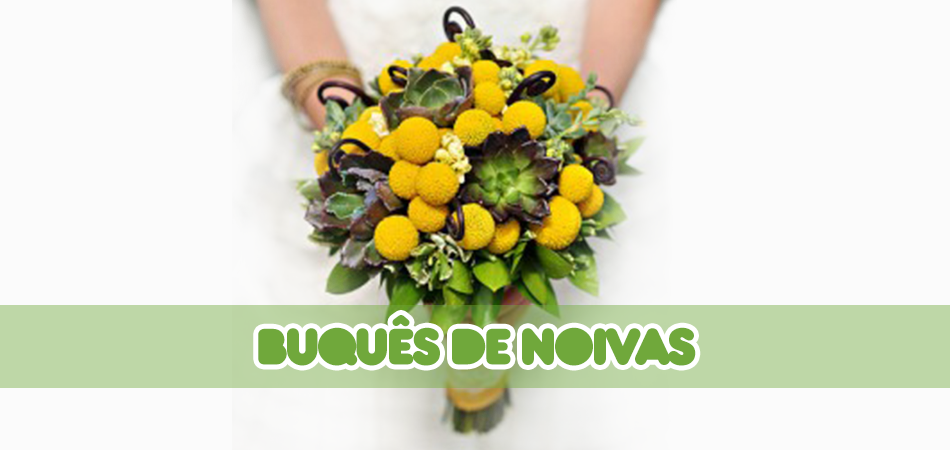
<style>
.page{position:relative;width:950px;height:450px;background:#fbfbfb}
.page>*{position:absolute;margin:0}
.t1{font:53.8px "BarutaBlack";letter-spacing:-0.05em;color:#70a83b;text-transform:uppercase}
</style>
<div class="page">
<p class="t1" style="left:258px;top:315px;width:438px;height:51px">BUQUÊS DE NOIVAS</p>
</div>
